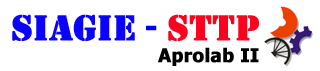
<style>
.page{position:relative;width:320px;height:71px;background:#ffffff}
.page>*{position:absolute;margin:0}
.t1{font:37.4px "Stencil";color:#0903fd;font-weight:bold}
.t2{font:37.4px "Stencil";color:#0000ff;font-weight:bold}
.t3{font:37.4px "Stencil";color:#fe011f;font-weight:bold}
.t4{font:18.7px "Tahoma-Bold";color:#000000;font-weight:bold}
</style>
<div class="page">
<p class="t1" style="left:12px;top:14px;width:247px;height:27px">SIAGIE <span class="t2">- </span><span class="t3">STTP</span></p>
<p class="t4" style="left:158px;top:47px;width:101px;height:19px">Aprolab II</p>
</div>
